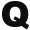
<style>
.page{position:relative;width:30px;height:30px;background:#0e0e0e}
.page>*{position:absolute;margin:0}
.t1{font:35px "Arial-Black";color:#0e0e0e;text-transform:uppercase}
</style>
<div class="page">
<p class="t1" style="left:2px;top:1px;width:28px;height:29px">q</p>
</div>
